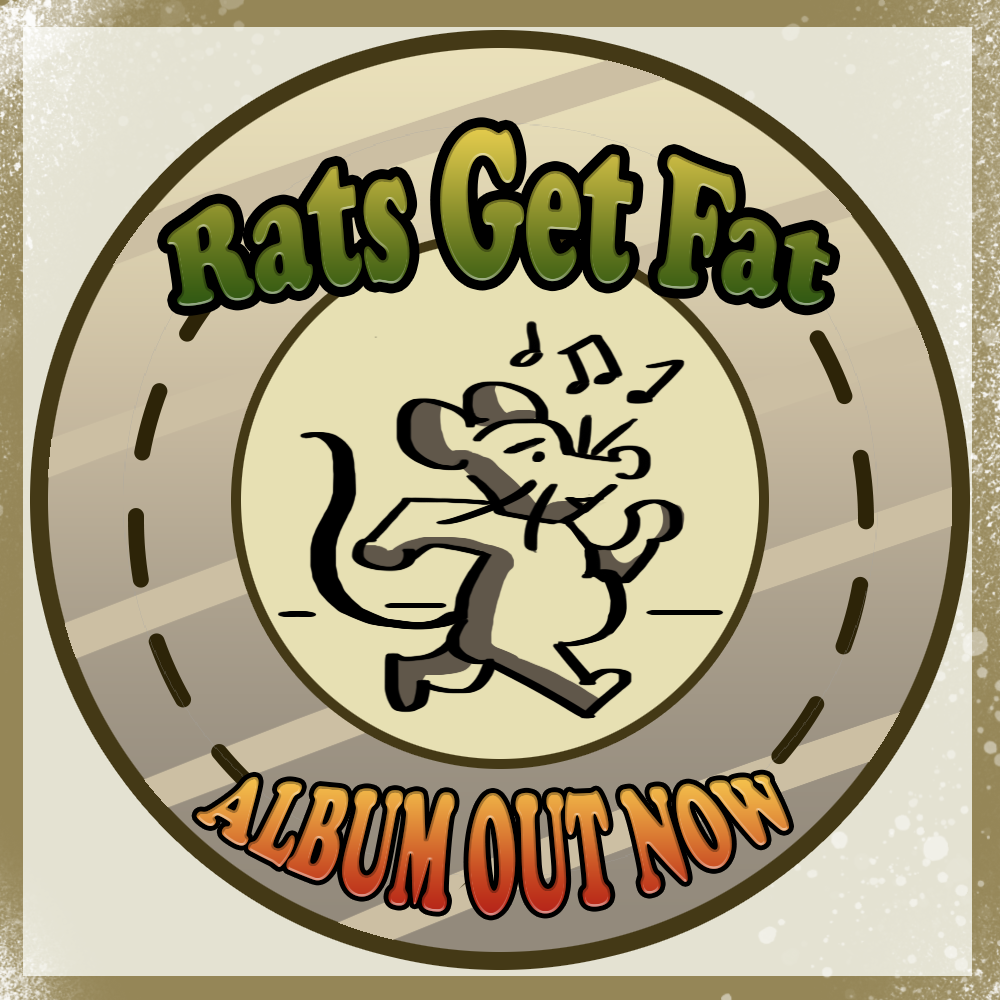
<style>
.page{position:relative;width:1000px;height:1000px}
.page>*{position:absolute;margin:0}
.t1{font:105.7px "CooperBlack"}
.t2{font:61.9px "CooperBlack"}
</style>
<div class="page">
<p class="t1" style="left:167px;top:127px;width:664px;height:179px">Rats Get Fat</p>
<p class="t2" style="left:196px;top:774px;width:593px;height:142px">ALBUM OUT NOW</p>
</div>
